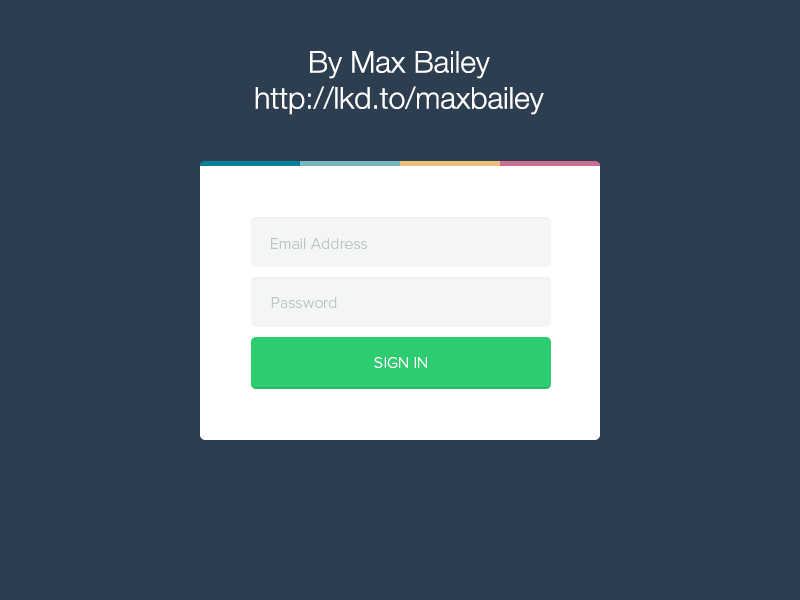
<style>
.page{position:relative;width:800px;height:600px;background:#2c3e50}
.page>*{position:absolute;margin:0}
.t1{font:30px "HelveticaNeue-Light";color:#ffffff}
.t2{font:16px "ProximaNova-Light";color:#c1c4c5}
.t3{font:16px "ProximaNova-Light";color:#ffffff}
</style>
<div class="page">
<p class="t1" style="left:255px;top:51px;width:289px;height:64px;text-align:center">By Max Bailey<br>http://lkd.to/maxbailey</p>
<p class="t2" style="left:271px;top:238px;width:97px;height:11px">Email Address</p>
<p class="t2" style="left:271px;top:297px;width:66px;height:11px">Password</p>
<p class="t3" style="left:374px;top:357px;width:53px;height:11px">SIGN IN</p>
</div>
